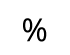
<style>
.page{position:relative;width:70px;height:55px;background:#ffffff}
.page>*{position:absolute;margin:0}
.t1{font:31.8px "DroidSans";color:#000000}
</style>
<div class="page">
<p class="t1" style="left:23px;top:18px;width:24px;height:24px">%</p>
</div>
